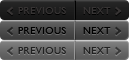
<style>
.page{position:relative;width:129px;height:60px}
.page>*{position:absolute;margin:0}
.t1{font:10px "GillSans";letter-spacing:0.05em;color:#373434}
.t2{font:10px "GillSans";letter-spacing:0.05em;color:#000000}
.t3{font:10px "GillSans";letter-spacing:0.05em;color:#212121}
</style>
<div class="page">
<p class="t1" style="left:18px;top:7px;width:93px;height:7px">PREVIOUS     NEXT</p>
<p class="t2" style="left:18px;top:27px;width:93px;height:7px">PREVIOUS     NEXT</p>
<p class="t3" style="left:18px;top:47px;width:93px;height:7px">PREVIOUS     NEXT</p>
</div>
